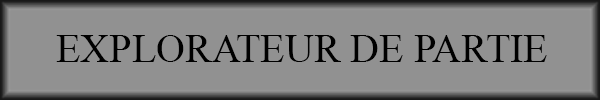
<style>
.page{position:relative;width:600px;height:100px;background:#919191}
.page>*{position:absolute;margin:0}
.t1{font:40px "TimesNewRomanPSMT";color:#000000}
</style>
<div class="page">
<p class="t1" style="left:56px;top:35px;width:491px;height:27px">EXPLORATEUR DE PARTIE</p>
</div>
